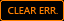
<style>
.page{position:relative;width:64px;height:21px;background:#000000}
.page>*{position:absolute;margin:0}
.t1{font:10px "SegoeUI";color:#ff8000}
</style>
<div class="page">
<p class="t1" style="left:8px;top:7px;width:50px;height:7px">CLEAR ERR.</p>
</div>
